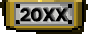
<style>
.page{position:relative;width:88px;height:34px}
.page>*{position:absolute;margin:0}
.t1{font:18px "InterTight-Black";letter-spacing:-0.04em;color:#000000}
</style>
<div class="page">
<p class="t1" style="left:20px;top:8px;width:48px;height:14px">20XX</p>
</div>
